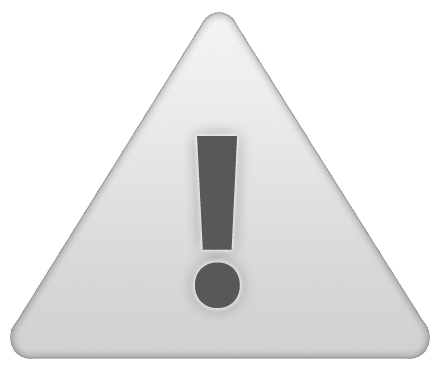
<style>
.page{position:relative;width:439px;height:368px;background:#ffffff}
.page>*{position:absolute;margin:0}
.t1{font:250px "MyriadPro-Bold";color:#585858}
</style>
<div class="page">
<p class="t1" style="left:195px;top:136px;width:45px;height:172px">!</p>
</div>
